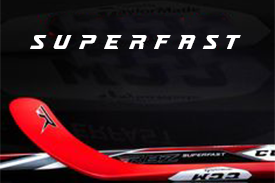
<style>
.page{position:relative;width:275px;height:183px}
.page>*{position:absolute;margin:0}
.t1{font:20px "RichardsonBrandAccelerator";color:#ffffff}
</style>
<div class="page">
<p class="t1" style="left:30px;top:35px;width:211px;height:14px">S-U-P-E-R-F-A-S-T</p>
</div>
